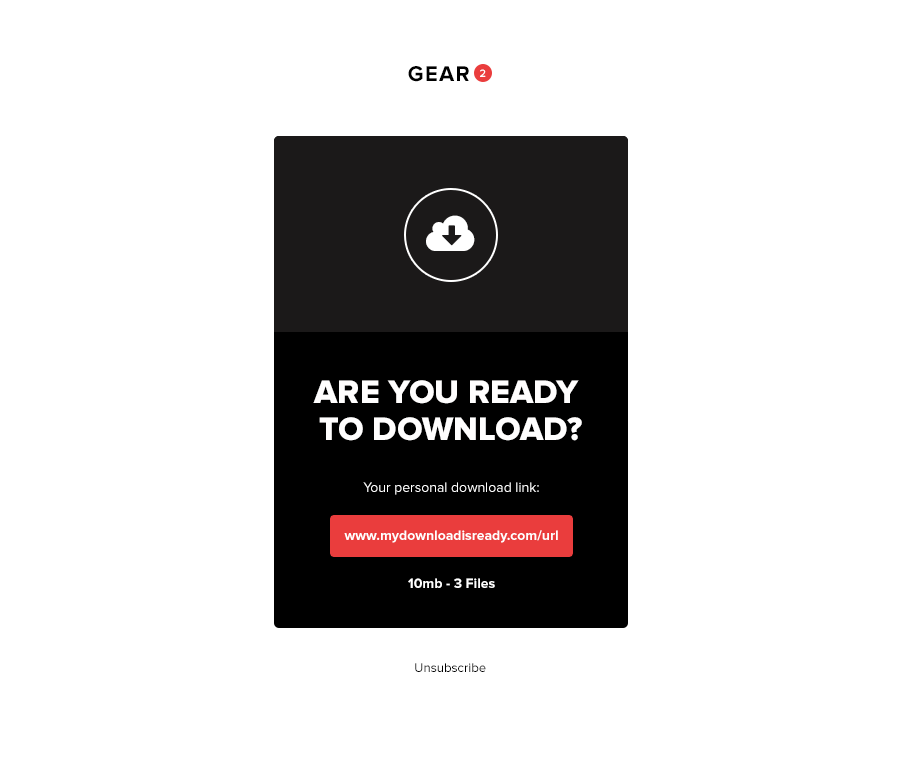
<style>
.page{position:relative;width:900px;height:773px;background:#ffffff}
.page>*{position:absolute;margin:0}
.t1{font:22px "ProximaNova-Bold";letter-spacing:0.06em;color:#000000;text-transform:uppercase}
.t2{font:11px "ProximaNova-Semibold";color:#fffefe}
.t3{font:33.6px/31.3px "ProximaNova-Extrabld";color:#fffefe;text-transform:uppercase}
.t4{font:14px "ProximaNova-Regular";color:#ffffff}
.t5{font:14px "ProximaNova-Bold";color:#ffffff}
.t6{font:13.1px "ProximaNova-Regular";color:#000000}
</style>
<div class="page">
<p class="t1" style="left:408px;top:66px;width:61px;height:16px">Gear</p>
<p class="t2" style="left:480px;top:69px;width:6px;height:8px">2</p>
<p class="t3" style="left:313px;top:380px;width:269px;height:61px;text-align:center">Are you ready <br>to download?</p>
<p class="t4" style="left:363px;top:482px;width:176px;height:13px">Your personal download link:</p>
<p class="t5" style="left:344px;top:530px;width:214px;height:13px">www.mydownloadisready.com/url</p>
<p class="t5" style="left:408px;top:578px;width:87px;height:10px">10mb - 3 Files</p>
<p class="t6" style="left:415px;top:663px;width:71px;height:9px">Unsubscribe</p>
</div>
